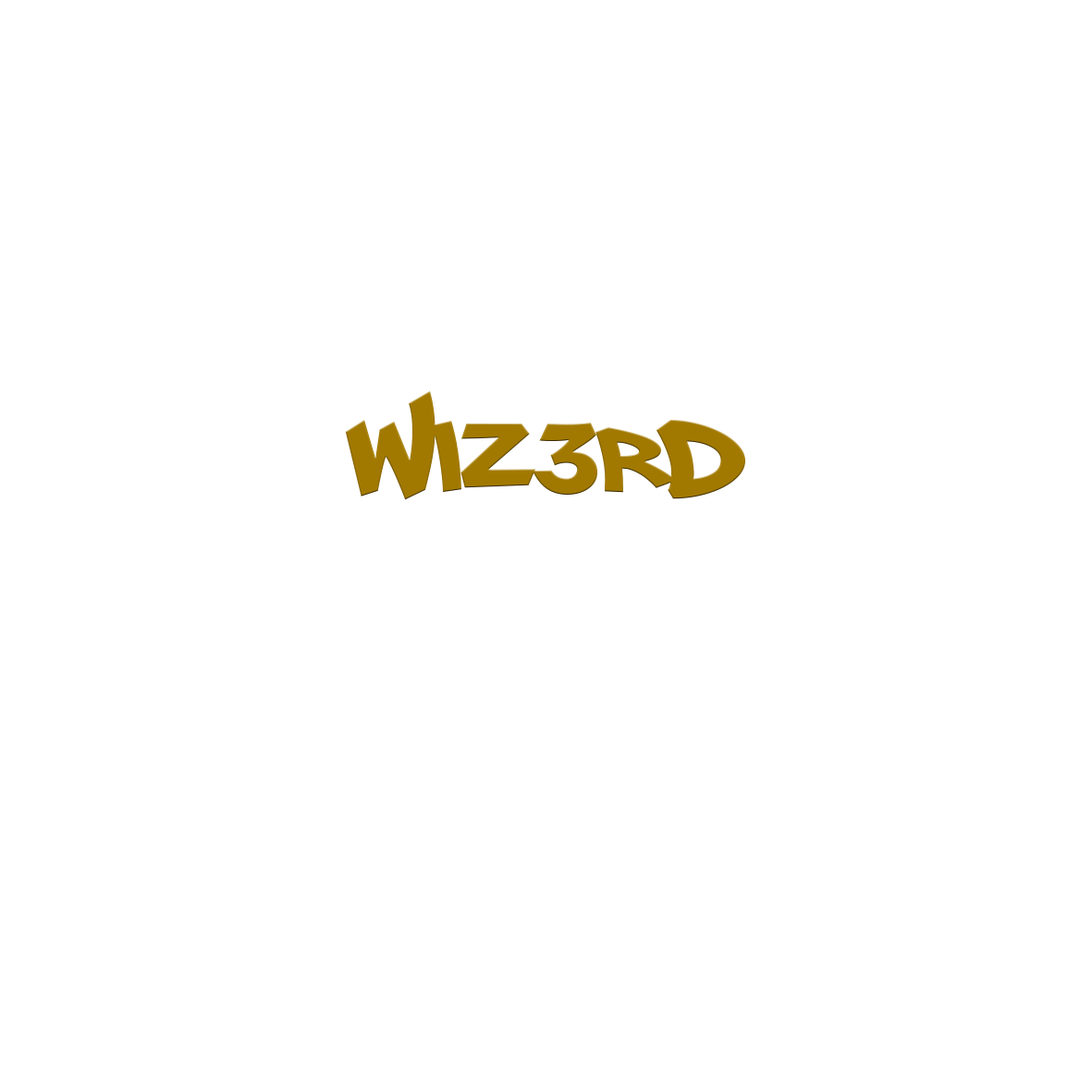
<style>
.page{position:relative;width:1092px;height:1092px;background:#ffffff}
.page>*{position:absolute;margin:0}
.t1{font:138.7px "PhillySans-Regular";color:#a27900}
</style>
<div class="page">
<p class="t1" style="left:345px;top:391px;width:400px;height:109px">Wiz3rd</p>
</div>
